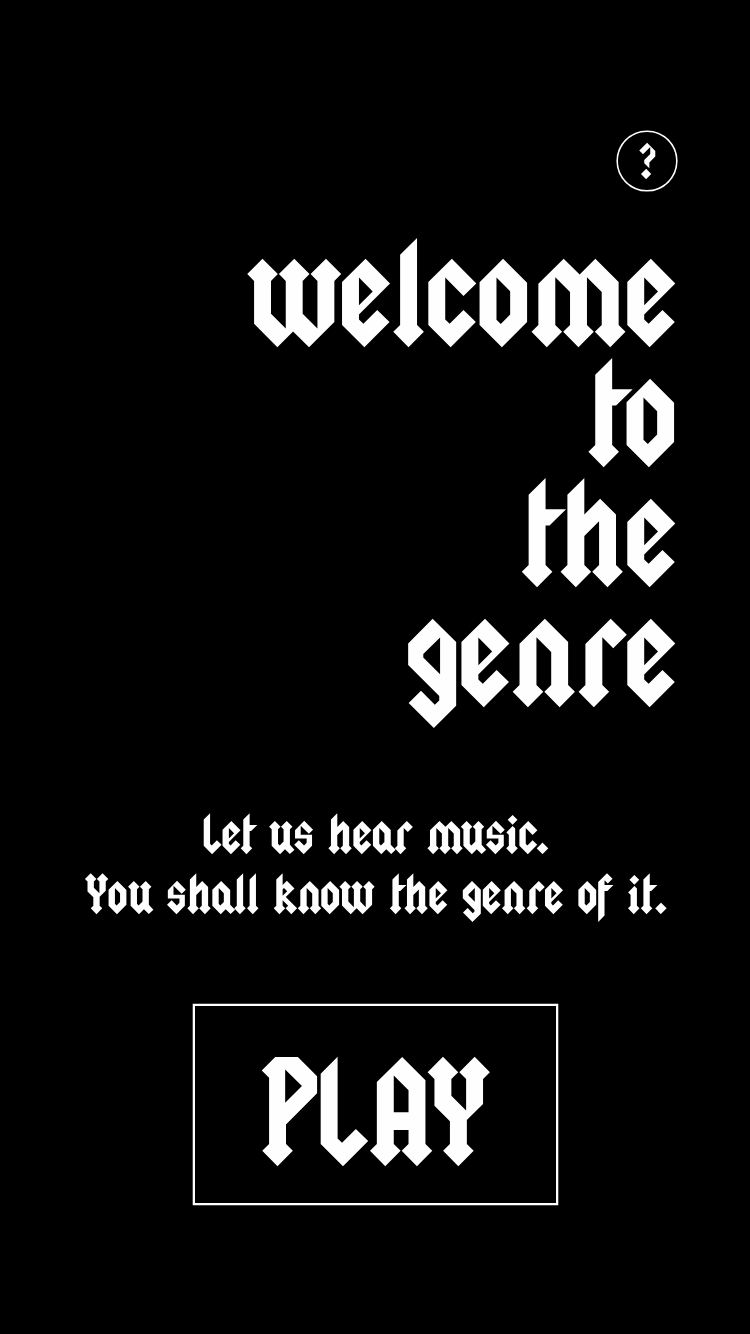
<style>
.page{position:relative;width:750px;height:1334px;background:#000000}
.page>*{position:absolute;margin:0}
.t1{font:40px "Squealer";color:#fffefe}
.t2{font:120px/120px "Squealer";color:#fffefe}
.t3{font:45px/60px "Squealer";color:#fffefe}
.t4{font:120px "Squealer";color:#fffefe}
</style>
<div class="page">
<p class="t1" style="left:639px;top:142px;width:17px;height:38px">?</p>
<p class="t2" style="left:247px;top:237px;width:429px;height:492px;text-align:right">welcome<br>to<br>the<br>genre</p>
<p class="t3" style="left:84px;top:813px;width:583px;height:109px;text-align:center">Let us hear music.<br>You shall know the genre of it.</p>
<p class="t4" style="left:261px;top:1056px;width:229px;height:111px">PLAY</p>
</div>
